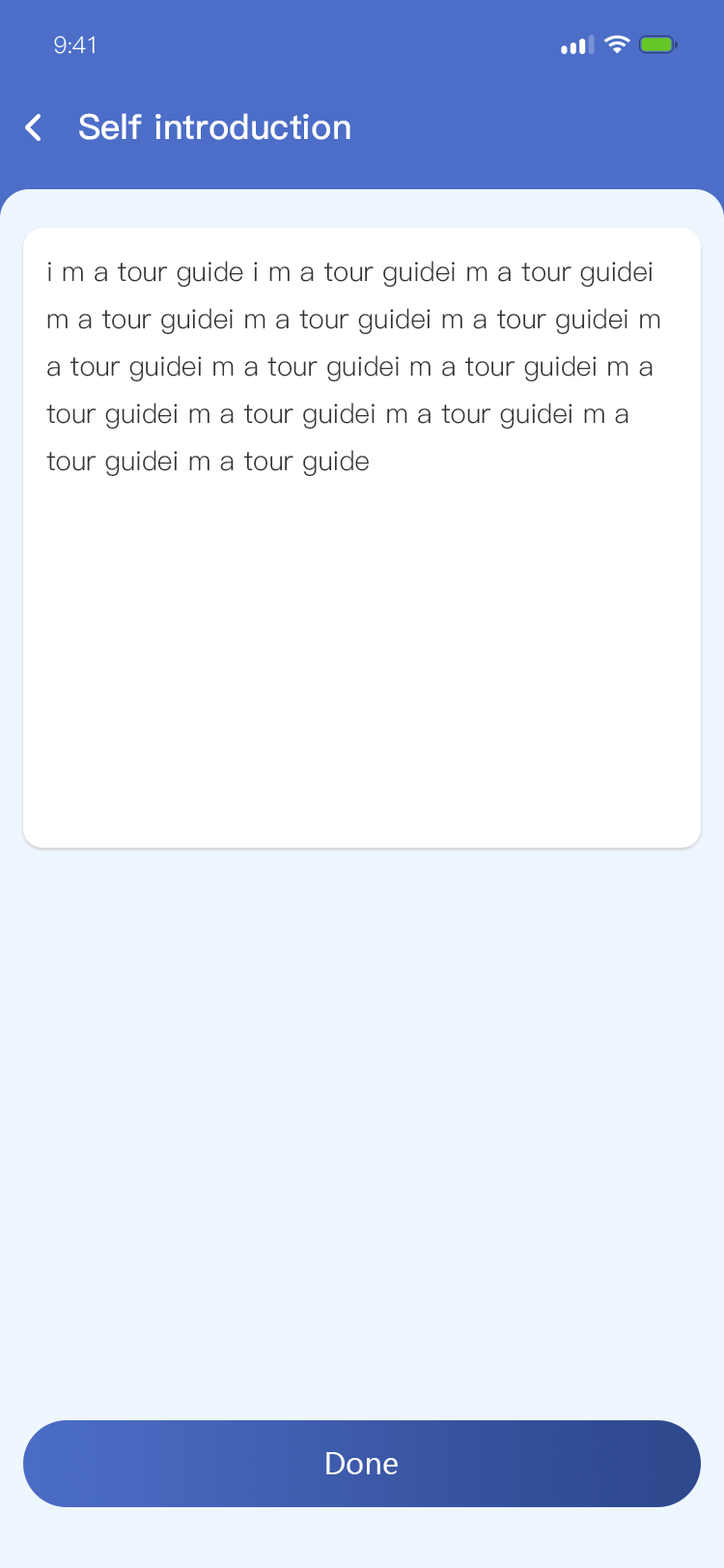
<style>
.page{position:relative;width:724px;height:1568px;background:#eef6ff}
.page>*{position:absolute;margin:0}
.t1{font:23.2px "PingFang-SC-Regular";letter-spacing:-0.025em;color:#ffffff}
.t2{font:34.8px "PingFang-SC-Bold";color:#feffff}
.t3{font:34.8px "PingFang-SC-Bold";color:#feffff;text-transform:uppercase}
.t4{font:27px "PingFang-SC-Regular";color:#333333}
.t5{font:29px "MicrosoftYaHei";color:#ffffff}
</style>
<div class="page">
<p class="t1" style="left:54px;top:36px;width:41px;height:18px">9:41</p>
<p class="t2" style="left:79px;top:113px;width:271px;height:27px"><span class="t3">s</span>elf introduction</p>
<p class="t4" style="left:46px;top:261px;width:614px;height:216px">i m a tour guide i m a tour guidei m a tour guidei m a tour guidei m a tour guidei m a tour guidei m a tour guidei m a tour guidei m a tour guidei m a tour guidei m a tour guidei m a tour guidei m a tour guidei m a tour guide</p>
<p class="t5" style="left:326px;top:1452px;width:72px;height:22px">Done</p>
</div>
